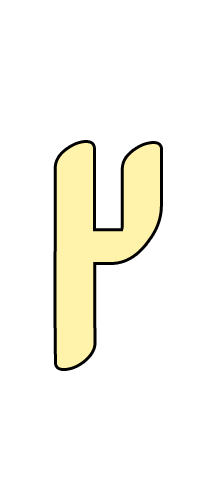
<style>
.page{position:relative;width:200px;height:500px;background:#ffffff}
.page>*{position:absolute;margin:0}
.t1{font:293.8px "AArsoo-Bold";color:#fff2aa;scale:0.96 1}
</style>
<div class="page">
<p class="t1" style="left:56px;top:143px;width:104px;height:225px">2</p>
</div>
